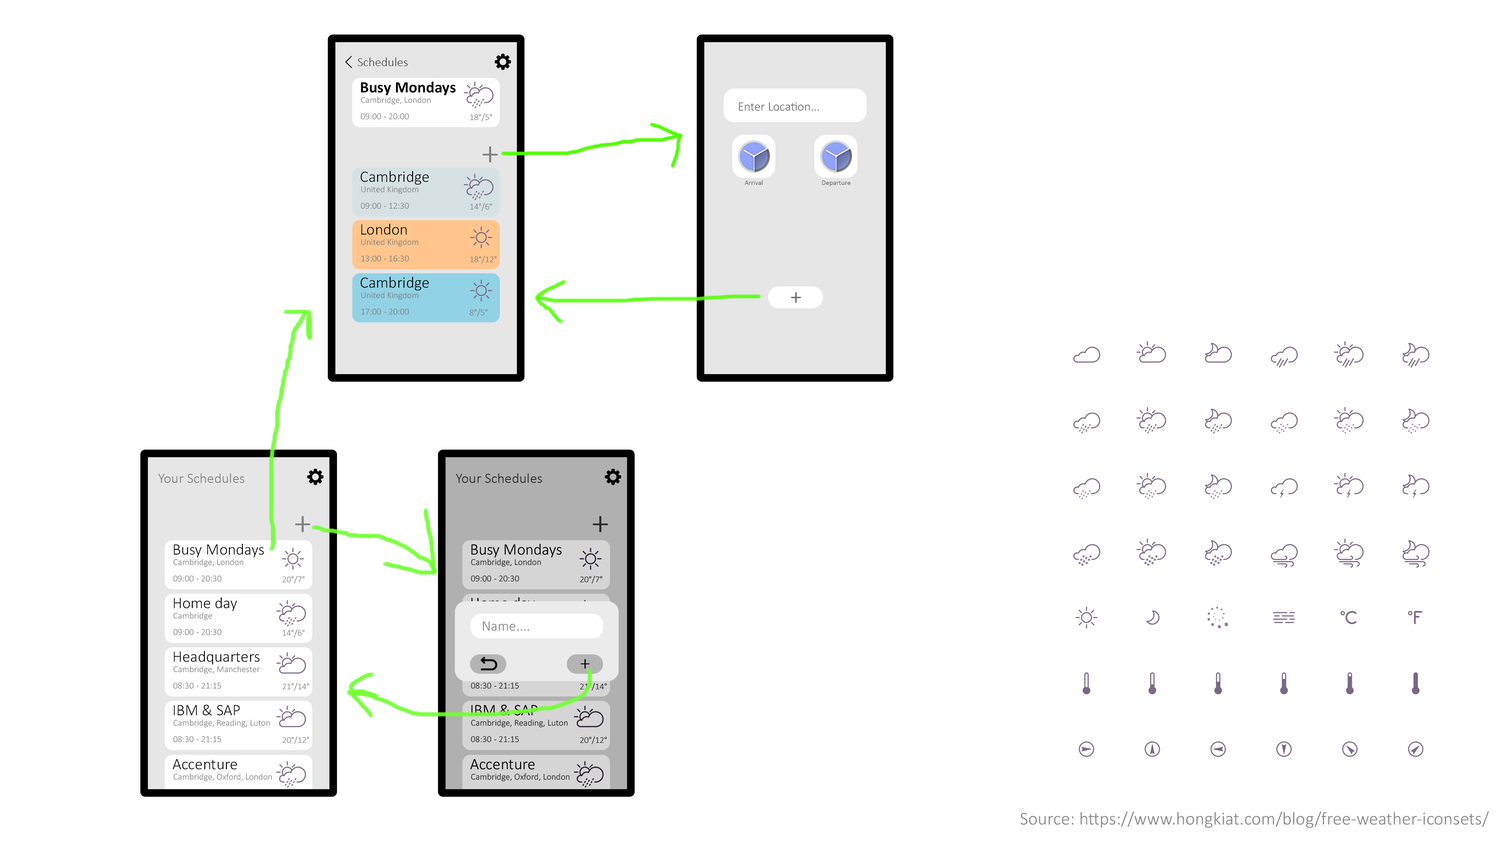
<style>
.page{position:relative;width:1512px;height:850px;background:#ffffff}
.page>*{position:absolute;margin:0}
.t1{font:12.6px "Calibri-Light";color:#333333}
.t2{font:16px "Calibri-Bold";color:#000000}
.t3{font:9px "Calibri-Light";color:#7f7f7f}
.t4{font:12.6px "Calibri-Light";color:#616161}
.t5{font:36px "Calibri-Light";color:#7f7f7f}
.t6{font:16px "Calibri-Light";color:#000000}
.t7{font:7.1px "Calibri-Light";color:#4d4d4d}
.t8{font:23.4px "Calibri-Light";color:#616161}
.t9{font:14.4px "Calibri-Light";color:#7f7f7f}
.t10{font:14.4px "Calibri-Light";color:#292929}
.t11{font:36px "Calibri-Light";color:#292929}
.t12{font:9px "Calibri-Light";color:#292929}
.t13{font:21.6px "Calibri-Light";color:#000000}
.t14{font:16px "Calibri-Light"}
.t15{font:18.3px "Calibri-Light";color:#7f7f7f}
</style>
<div class="page">
<p class="t1" style="left:358px;top:57px;width:50px;height:9px">Schedules</p>
<p class="t2" style="left:361px;top:82px;width:95px;height:13px">Busy Mondays</p>
<p class="t3" style="left:361px;top:96px;width:70px;height:9px">Cambridge, London</p>
<p class="t3" style="left:361px;top:113px;width:48px;height:7px">09:00  - 20:00</p>
<p class="t3" style="left:470px;top:114px;width:22px;height:7px">18°/5°</p>
<p class="t4" style="left:739px;top:102px;width:80px;height:9px">Enter Location...</p>
<p class="t5" style="left:483px;top:146px;width:15px;height:16px">+</p>
<p class="t6" style="left:361px;top:171px;width:68px;height:14px">Cambridge</p>
<p class="t3" style="left:361px;top:186px;width:58px;height:8px">United Kingdom</p>
<p class="t7" style="left:745px;top:180px;width:18px;height:5px">Arrival</p>
<p class="t7" style="left:822px;top:181px;width:29px;height:5px">Departure</p>
<p class="t3" style="left:361px;top:203px;width:48px;height:6px">09:00  - 12:30</p>
<p class="t3" style="left:470px;top:203px;width:22px;height:8px">14°/6°</p>
<p class="t6" style="left:361px;top:224px;width:46px;height:11px">London</p>
<p class="t3" style="left:361px;top:238px;width:58px;height:9px">United Kingdom</p>
<p class="t3" style="left:361px;top:255px;width:48px;height:7px">13:00  - 16:30</p>
<p class="t3" style="left:470px;top:256px;width:27px;height:8px">18°/12°</p>
<p class="t6" style="left:361px;top:276px;width:68px;height:15px">Cambridge</p>
<p class="t3" style="left:361px;top:292px;width:58px;height:8px">United Kingdom</p>
<p class="t8" style="left:791px;top:292px;width:10px;height:11px">+</p>
<p class="t3" style="left:361px;top:308px;width:48px;height:7px">17:00  - 20:00</p>
<p class="t3" style="left:470px;top:309px;width:18px;height:8px">8°/5°</p>
<p class="t9" style="left:158px;top:473px;width:87px;height:10px">Your Schedules</p>
<p class="t10" style="left:456px;top:473px;width:86px;height:10px">Your Schedules</p>
<p class="t5" style="left:295px;top:516px;width:16px;height:16px">+</p>
<p class="t11" style="left:593px;top:516px;width:15px;height:16px">+</p>
<p class="t6" style="left:174px;top:544px;width:90px;height:14px">Busy Mondays</p>
<p class="t6" style="left:471px;top:544px;width:91px;height:14px">Busy Mondays</p>
<p class="t3" style="left:173px;top:559px;width:70px;height:8px">Cambridge, London</p>
<p class="t12" style="left:471px;top:559px;width:70px;height:8px">Cambridge, London</p>
<p class="t3" style="left:173px;top:575px;width:49px;height:7px">09:00  - 20:30</p>
<p class="t3" style="left:282px;top:576px;width:23px;height:8px">20°/7°</p>
<p class="t12" style="left:471px;top:575px;width:48px;height:7px">09:00  - 20:30</p>
<p class="t12" style="left:580px;top:576px;width:22px;height:8px">20°/7°</p>
<p class="t6" style="left:174px;top:597px;width:63px;height:14px">Home day</p>
<p class="t3" style="left:173px;top:612px;width:39px;height:8px">Cambridge</p>
<p class="t3" style="left:173px;top:629px;width:49px;height:6px">09:00  - 20:30</p>
<p class="t3" style="left:283px;top:629px;width:22px;height:8px">14°/6°</p>
<p class="t9" style="left:483px;top:621px;width:46px;height:10px">Name....</p>
<p class="t6" style="left:174px;top:651px;width:86px;height:14px">Headquarters</p>
<p class="t3" style="left:173px;top:666px;width:87px;height:8px">Cambridge, Manchester</p>
<p class="t13" style="left:581px;top:659px;width:9px;height:10px">+</p>
<p class="t3" style="left:173px;top:683px;width:48px;height:6px">08:30  - 21:15</p>
<p class="t3" style="left:282px;top:683px;width:27px;height:8px">21°/14°</p>
<p class="t12" style="left:471px;top:683px;width:48px;height:6px">08:30  - 21:15</p>
<p class="t12" style="left:580px;top:683px;width:27px;height:8px">21°/14°</p>
<p class="t6" style="left:174px;top:705px;width:66px;height:11px">IBM &amp; SAP</p>
<p class="t14" style="left:471px;top:705px;width:66px;height:11px">IBM &amp; SAP</p>
<p class="t3" style="left:173px;top:719px;width:97px;height:8px">Cambridge, Reading, Luton</p>
<p class="t12" style="left:471px;top:719px;width:97px;height:8px">Cambridge, Reading, Luton</p>
<p class="t3" style="left:173px;top:736px;width:48px;height:7px">08:30  - 21:15</p>
<p class="t3" style="left:282px;top:737px;width:27px;height:7px">20°/12°</p>
<p class="t12" style="left:471px;top:736px;width:48px;height:7px">08:30  - 21:15</p>
<p class="t12" style="left:580px;top:737px;width:27px;height:7px">20°/12°</p>
<p class="t6" style="left:172px;top:759px;width:65px;height:11px">Accenture</p>
<p class="t6" style="left:470px;top:759px;width:65px;height:11px">Accenture</p>
<p class="t3" style="left:173px;top:773px;width:99px;height:8px">Cambridge, Oxford, London</p>
<p class="t12" style="left:471px;top:773px;width:99px;height:8px">Cambridge, Oxford, London</p>
<p class="t15" style="left:1020px;top:811px;width:469px;height:17px">Source: https://www.hongkiat.com/blog/free-weather-iconsets/</p>
</div>
